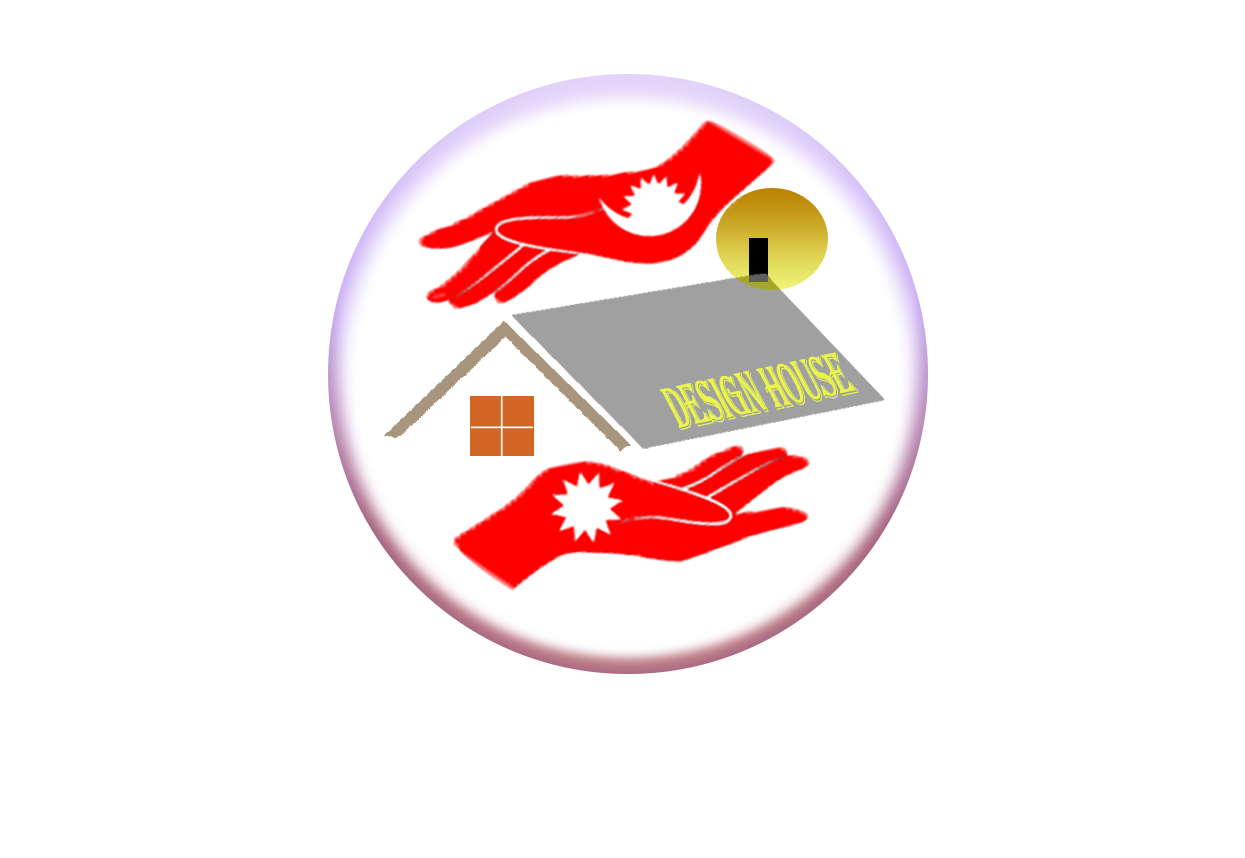
<style>
.page{position:relative;width:1245px;height:858px;background:#ffffff}
.page>*{position:absolute;margin:0}
.t1{font:68.2px "Algerian";letter-spacing:-0.04em;color:#ebf548;scale:0.43 1}
</style>
<div class="page">
<p class="t1" style="left:659px;top:352px;width:200px;height:78px;rotate:-12deg">DESIGN HOUSE</p>
</div>
